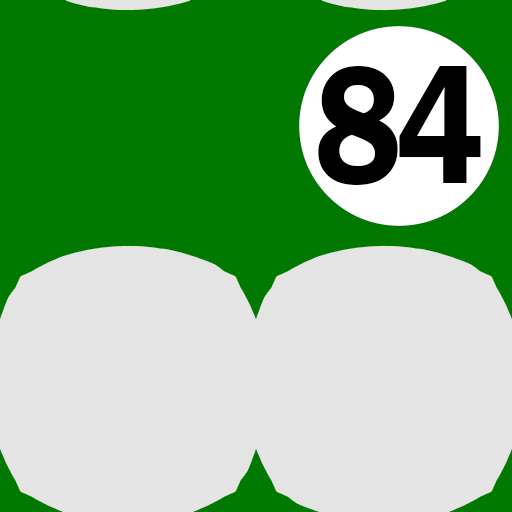
<style>
.page{position:relative;width:512px;height:512px;background:#e4e4e4}
.page>*{position:absolute;margin:0}
.t1{font:172.5px "FranklinGothic-Demi";letter-spacing:-0.05em;color:#010101;scale:0.87 1}
</style>
<div class="page">
<p class="t1" style="left:318px;top:66px;width:163px;height:119px">84</p>
</div>
